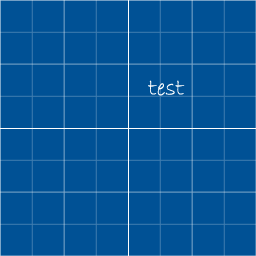
<style>
.page{position:relative;width:256px;height:256px;background:#005195}
.page>*{position:absolute;margin:0}
.t1{font:24px "BradleyHandITC";color:#ffffff}
</style>
<div class="page">
<p class="t1" style="left:148px;top:80px;width:37px;height:16px">test</p>
</div>
